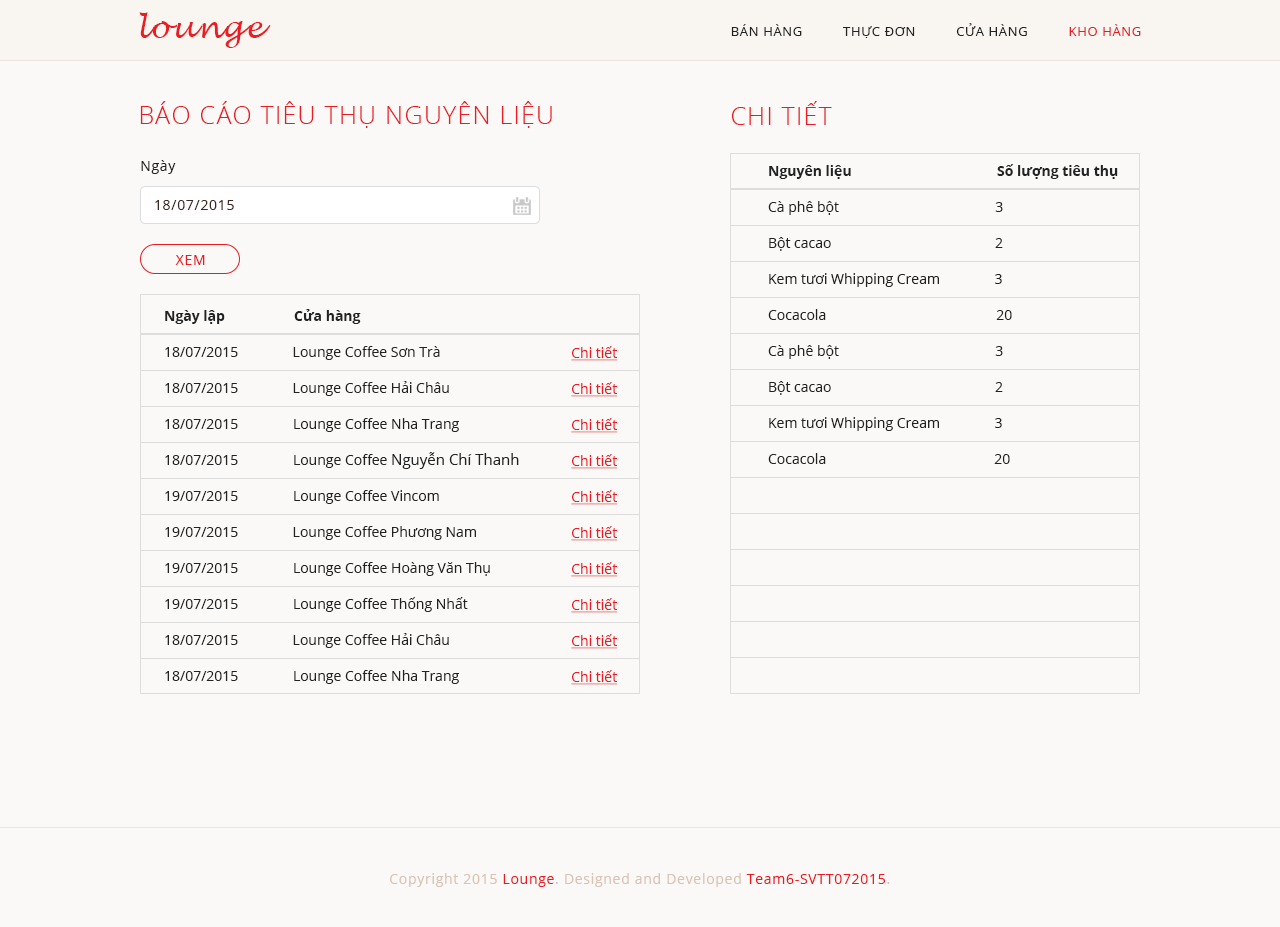
<style>
.page{position:relative;width:1280px;height:927px;background:#fbf9f7}
.page>*{position:absolute;margin:0}
.t1{font:30px "LucidaHandwriting-Italic";letter-spacing:0.05em;color:#ea1d24}
.t2{font:13px "OpenSans";letter-spacing:0.05em;color:#222222}
.t3{font:13px "OpenSans";letter-spacing:0.05em;color:#ea1d24}
.t4{font:25px "OpenSans-Light";letter-spacing:0.05em;color:#ea1d24}
.t5{font:14px "OpenSans";letter-spacing:0.05em;color:#222222}
.t6{font:14px/36px "OpenSans";color:#222222}
.t7{font:14px/36px "OpenSans-Bold";color:#222222}
.t8{font:14px "OpenSans";letter-spacing:0.05em;color:#3d2a23}
.t9{font:14px "OpenSans";letter-spacing:0.05em;color:#ea1d24}
.t10{font:15px/36px "OpenSans";color:#222222}
.t11{font:14px/36px "OpenSans";color:#ea1b23;text-decoration:underline}
.t12{font:14px "OpenSans";letter-spacing:0.05em;color:#dac3b4}
.t13{font:14px "OpenSans";letter-spacing:0.05em;color:#ea1b23}
</style>
<div class="page">
<p class="t1" style="left:139px;top:12px;width:132px;height:36px">lounge</p>
<p class="t2" style="left:731px;top:23px;width:410px;height:15px">BÁN HÀNG          THỰC ĐƠN          CỬA HÀNG      <span class="t3">    KHO HÀNG</span></p>
<p class="t4" style="left:140px;top:101px;width:412px;height:27px">BÁO CÁO TIÊU THỤ NGUYÊN LIỆU</p>
<p class="t4" style="left:732px;top:101px;width:100px;height:24px">CHI TIẾT</p>
<p class="t5" style="left:141px;top:160px;width:35px;height:14px">Ngày</p>
<p class="t6" style="left:768px;top:164px;width:350px;height:300px"><span class="t7">Nguyên liệu                                        Số lượng tiêu thụ<br></span>Cà phê bột                                           3<br>Bột cacao                                             2<br>Kem tươi Whipping Cream               3<br>Cocacola                                                20<br>Cà phê bột                                           3<br>Bột cacao                                             2<br>Kem tươi Whipping Cream               3<br>Cocacola                                               20</p>
<p class="t8" style="left:155px;top:200px;width:79px;height:10px">18/07/2015</p>
<p class="t9" style="left:175px;top:255px;width:30px;height:10px">XEM</p>
<p class="t6" style="left:165px;top:309px;width:354px;height:375px"><span class="t7">Ngày lập                   Cửa hàng<br></span>18/07/2015               Lounge Coffee Sơn Trà   <br>18/07/2015               Lounge Coffee Hải Châu<br>18/07/2015               Lounge Coffee Nha Trang<br>18/07/2015               Lounge Coffee <span class="t10">Nguyễn Chí Thanh <br></span>19/07/2015               Lounge Coffee Vincom      <br>19/07/2015               Lounge Coffee Phương Nam    <br>19/07/2015               Lounge Coffee Hoàng Văn Thụ     <br>19/07/2015               Lounge Coffee Thống Nhất     <br>18/07/2015               Lounge Coffee Hải Châu<br>18/07/2015               Lounge Coffee Nha Trang</p>
<p class="t11" style="left:571px;top:346px;width:47px;height:339px">Chi tiết<br>Chi tiết<br>Chi tiết<br>Chi tiết<br>Chi tiết<br>Chi tiết<br>Chi tiết<br>Chi tiết<br>Chi tiết<br>Chi tiết</p>
<p class="t12" style="left:390px;top:873px;width:500px;height:14px">Copyright 2015 <span class="t13">Lounge</span>. Designed and Developed <span class="t13">Team6-SVTT072015</span>.</p>
</div>
